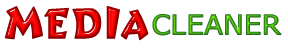
<style>
.page{position:relative;width:288px;height:52px;background:#ffffff}
.page>*{position:absolute;margin:0}
.t1{font:38.1px "TorchlightRegular";font-weight:bold}
.t2{font:27.3px "Tahoma";font-weight:bold;scale:1.1 1}
</style>
<div class="page">
<p class="t1" style="left:4px;top:6px;width:145px;height:35px">MEDIA</p>
<p class="t2" style="left:152px;top:13px;width:130px;height:23px">CLEANER</p>
</div>
